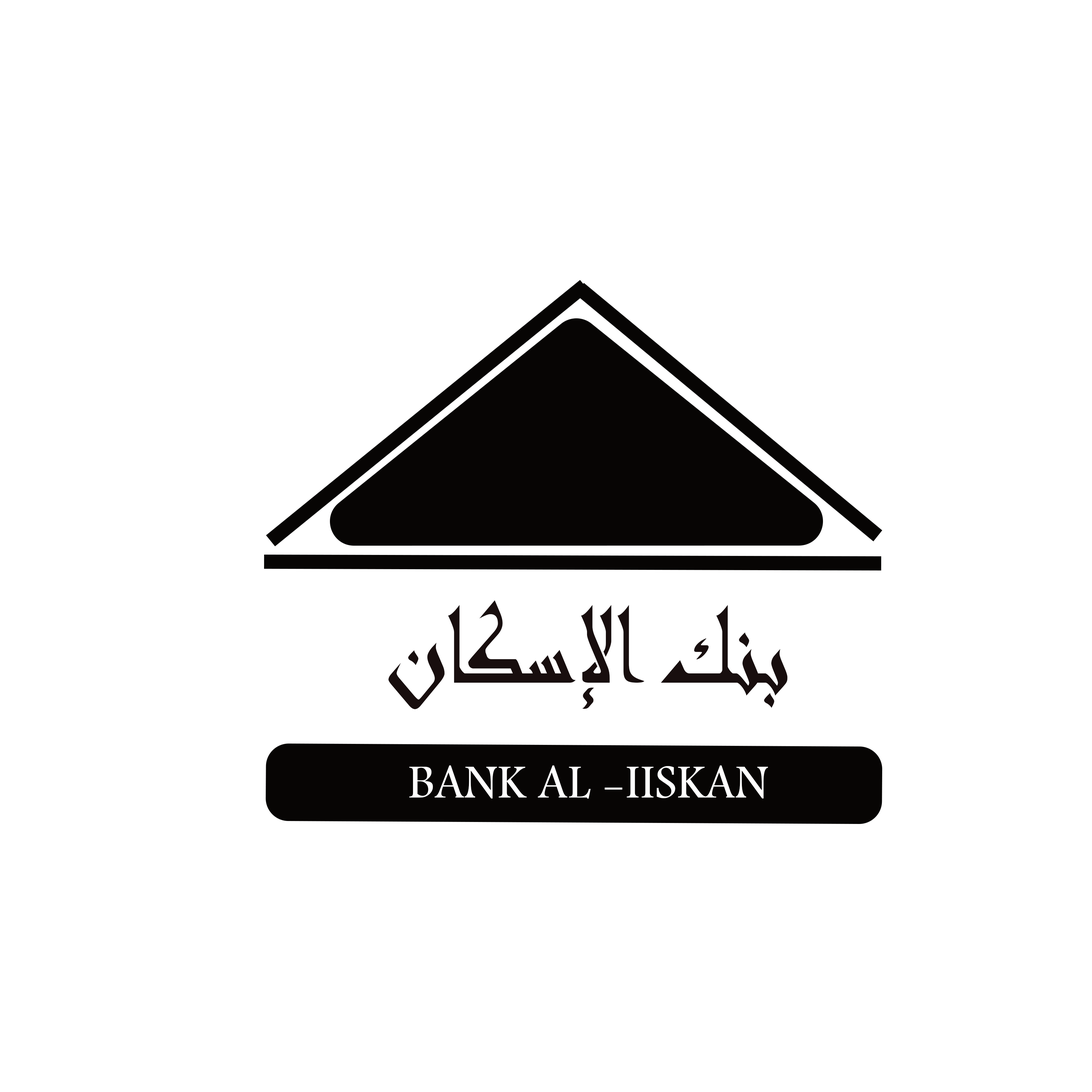
<style>
.page{position:relative;width:1092px;height:1092px;background:#ffffff}
.page>*{position:absolute;margin:0}
.t1{font:126.1px "Andalus";color:#180e0e;font-variant:small-caps;scale:0.84 1}
.t2{font:49px "Andalus";color:#ffffff;font-variant:small-caps}
</style>
<div class="page">
<p class="t1" style="left:388px;top:600px;width:400px;height:109px">بنك الإسكان</p>
<p class="t2" style="left:409px;top:765px;width:359px;height:34px">BANK AL -IISKAN</p>
</div>
